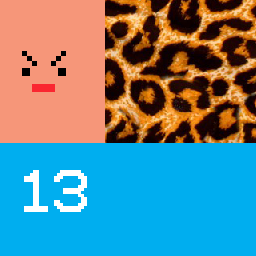
<style>
.page{position:relative;width:256px;height:256px;background:#00aeef}
.page>*{position:absolute;margin:0}
.t1{font:48px "Terminal";color:#ffffff}
</style>
<div class="page">
<p class="t1" style="left:24px;top:170px;width:63px;height:42px">13</p>
</div>
